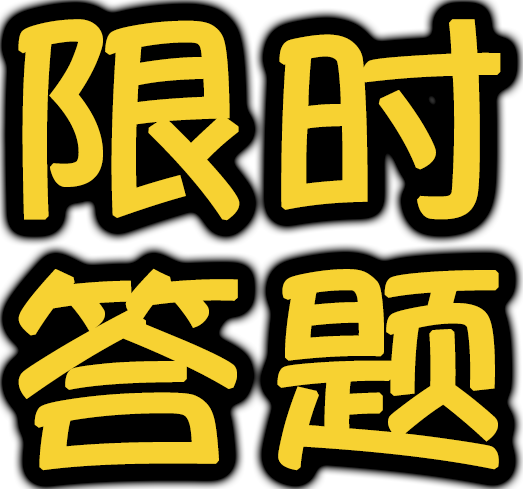
<style>
.page{position:relative;width:523px;height:489px;background:#000000}
.page>*{position:absolute;margin:0}
.t1{font:225px "MYuppy-Bold-DDC";letter-spacing:0.02em;color:#f7d232;font-weight:bold;scale:1.11 1}
</style>
<div class="page">
<p class="t1" style="left:18px;top:19px;width:483px;height:202px">限时</p>
<p class="t1" style="left:18px;top:268px;width:481px;height:203px">答题</p>
</div>
